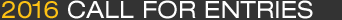
<style>
.page{position:relative;width:342px;height:20px;background:#333333}
.page>*{position:absolute;margin:0}
.t1{font:23.8px "HelveticaNeueLTStd-Ex";color:#ffffff;text-transform:uppercase}
.t2{font:23.8px "HelveticaNeueLTStd-Ex";color:#fdc214;text-transform:uppercase}
</style>
<div class="page">
<p class="t1" style="left:2px;top:0px;width:311px;height:19px"><span class="t2">2016</span> Call For Entries</p>
</div>
